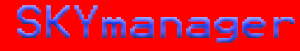
<style>
.page{position:relative;width:300px;height:51px;background:#ff0000}
.page>*{position:absolute;margin:0}
.t1{font:37.5px "Terminal"}
</style>
<div class="page">
<p class="t1" style="left:17px;top:5px;width:278px;height:38px">SKYmanager</p>
</div>
